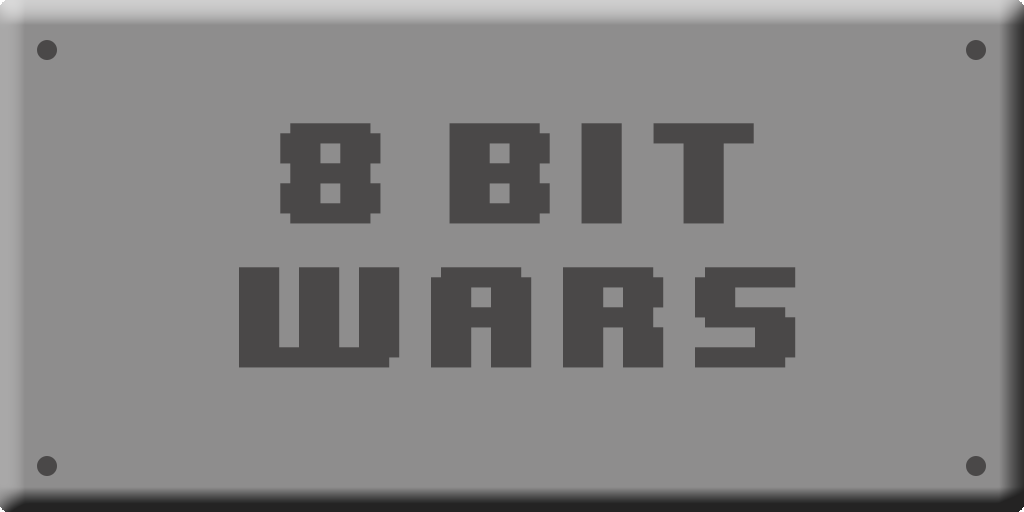
<style>
.page{position:relative;width:1024px;height:512px;background:#8e8d8d}
.page>*{position:absolute;margin:0}
.t1{font:120px "8BITWONDERNominal";letter-spacing:0.1em;color:#4a4848}
</style>
<div class="page">
<p class="t1" style="left:239px;top:123px;width:557px;height:245px;text-align:center">8 BIT<br>WARS</p>
</div>
